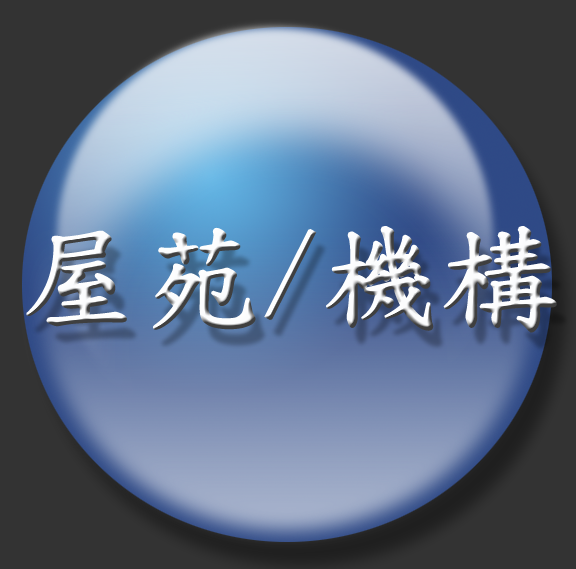
<style>
.page{position:relative;width:576px;height:569px;background:#333333}
.page>*{position:absolute;margin:0}
.t1{font:116.7px "DFKaiShu-SB-Estd-BF";font-weight:bold}
</style>
<div class="page">
<p class="t1" style="left:26px;top:226px;width:531px;height:107px">屋苑/機構</p>
</div>
